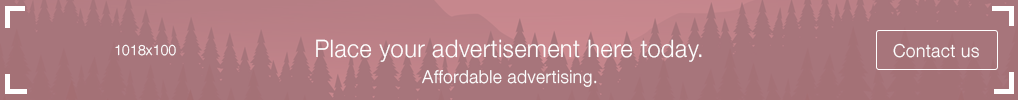
<style>
.page{position:relative;width:1018px;height:100px;background:#a7757b}
.page>*{position:absolute;margin:0}
.t1{font:24px "HelveticaNeue-Light";letter-spacing:0.01em;color:#ffffff}
.t2{font:14px "HelveticaNeue-Light";letter-spacing:0.01em;color:#ffffff}
.t3{font:18px "HelveticaNeue-Light";letter-spacing:0.01em;color:#ffffff}
</style>
<div class="page">
<p class="t1" style="left:316px;top:39px;width:386px;height:23px">Place your advertisement here today.</p>
<p class="t2" style="left:115px;top:44px;width:61px;height:12px">1018x100</p>
<p class="t3" style="left:893px;top:43px;width:86px;height:15px">Contact us</p>
<p class="t3" style="left:422px;top:70px;width:175px;height:17px">Affordable advertising.</p>
</div>
